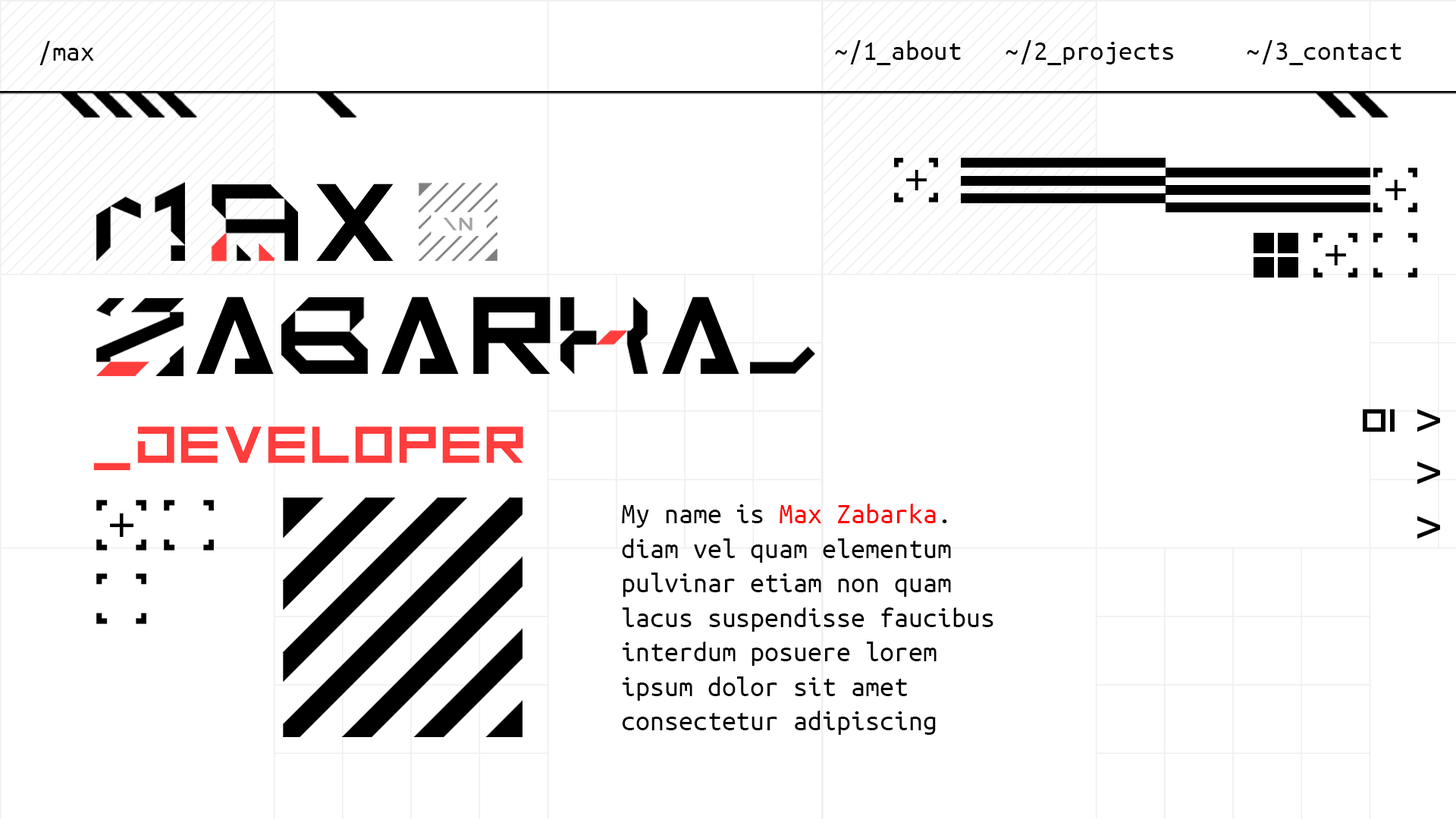
<style>
.page{position:relative;width:1456px;height:819px;background:#ffffff}
.page>*{position:absolute;margin:0}
.t1{font:28.1px "UbuntuMono-Regular";color:#000000}
.t2{font:28.4px "UbuntuMono-Regular";color:#000000}
.t3{font:123px "Android101";color:#000000}
.t4{font:20.5px "Android101";color:#a3a3a3}
.t5{font:36.5px "Android101";color:#000000}
.t6{font:58.1px "Android101";color:#ff3d3d}
.t7{font:28.7px "UbuntuMono-Regular";color:#010101}
.t8{font:28.7px "UbuntuMono-Regular";color:#ff0000}
</style>
<div class="page">
<p class="t1" style="left:39px;top:41px;width:55px;height:24px">/max</p>
<p class="t2" style="left:835px;top:40px;width:566px;height:25px">~/1_about   ~/2_projects   ~/3_contact</p>
<p class="t3" style="left:316px;top:184px;width:78px;height:78px">X</p>
<p class="t4" style="left:443px;top:218px;width:29px;height:13px">\n</p>
<p class="t3" style="left:196px;top:297px;width:543px;height:78px">A  AR  A</p>
<p class="t5" style="left:1363px;top:409px;width:77px;height:23px">01 &gt;</p>
<p class="t6" style="left:93px;top:426px;width:430px;height:44px">_DEVELOPER</p>
<p class="t5" style="left:1417px;top:461px;width:23px;height:24px">&gt;</p>
<p class="t7" style="left:622px;top:504px;width:371px;height:231px">My name is <span class="t8">Max Zabarka</span>.<br>diam vel quam elementum<br>pulvinar etiam non quam<br>lacus suspendisse faucibus<br>interdum posuere lorem<br>ipsum dolor sit amet<br>consectetur adipiscing</p>
<p class="t5" style="left:1417px;top:516px;width:23px;height:23px">&gt;</p>
</div>
